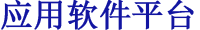
<style>
.page{position:relative;width:200px;height:30px;background:#ffffff}
.page>*{position:absolute;margin:0}
.t1{font:32px "SimSun";color:#1215a1;font-weight:bold}
</style>
<div class="page">
<p class="t1" style="left:1px;top:0px;width:193px;height:30px">应用软件平台</p>
</div>
